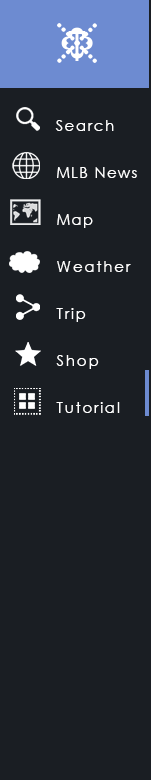
<style>
.page{position:relative;width:151px;height:780px;background:#1a1e23}
.page>*{position:absolute;margin:0}
.t1{font:10px "CenturyGothic";letter-spacing:0.1em;color:#ffffff}
.t2{font:15px "CenturyGothic";letter-spacing:0.1em;color:#ffffff}
.t3{font:14.6px "CenturyGothic";letter-spacing:0.1em;color:#ffffff}
.t4{font:15.5px "CenturyGothic";letter-spacing:0.1em;color:#ffffff}
</style>
<div class="page">
<p class="t1" style="left:68px;top:31px;width:18px;height:30px">T</p>
<p class="t2" style="left:55px;top:120px;width:59px;height:11px">Search</p>
<p class="t3" style="left:57px;top:167px;width:80px;height:11px">MLB News</p>
<p class="t3" style="left:57px;top:214px;width:36px;height:14px">Map</p>
<p class="t4" style="left:57px;top:261px;width:74px;height:11px">Weather</p>
<p class="t4" style="left:56px;top:308px;width:30px;height:14px">Trip</p>
<p class="t4" style="left:56px;top:355px;width:43px;height:14px">Shop</p>
<p class="t4" style="left:56px;top:402px;width:64px;height:11px">Tutorial</p>
</div>
